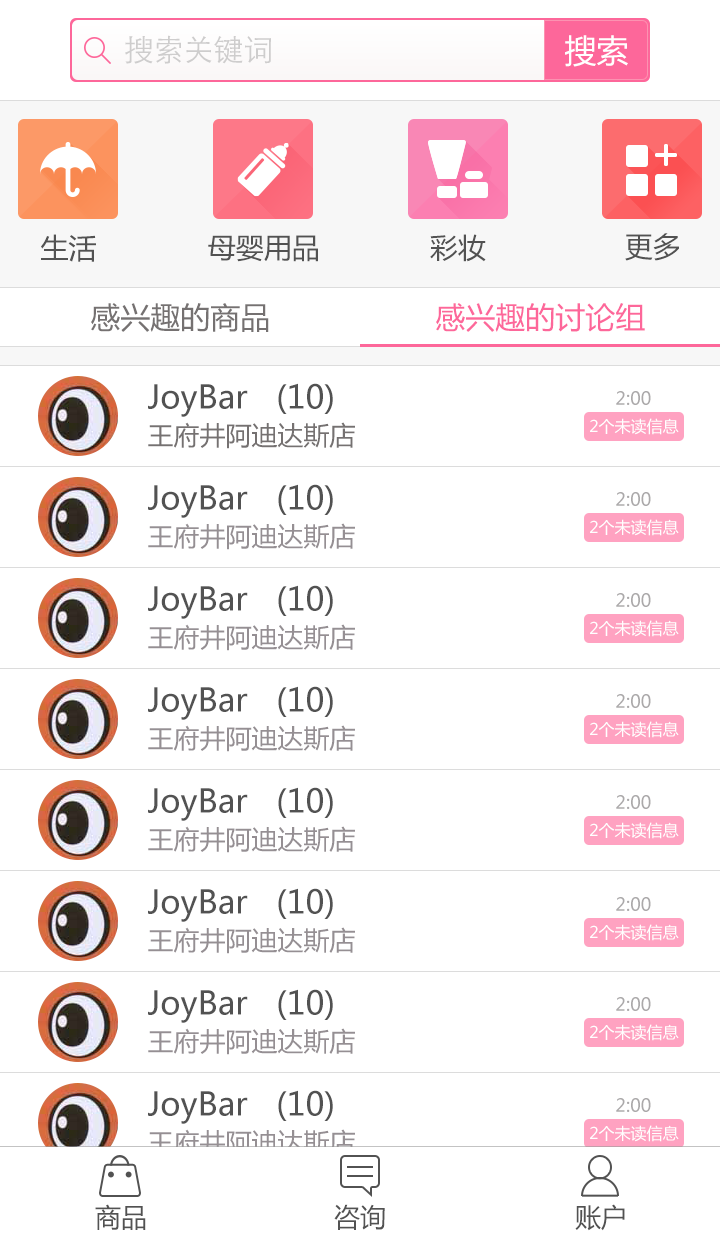
<style>
.page{position:relative;width:720px;height:1242px;background:#ffffff}
.page>*{position:absolute;margin:0}
.t1{font:30px "STXihei";color:#cecdcd}
.t2{font:32px "MicrosoftYaHei";color:#ffffff}
.t3{font:28px "MicrosoftYaHei";color:#525252}
.t4{font:30px "MicrosoftYaHei";color:#757171}
.t5{font:30px "MicrosoftYaHei";color:#fd679a}
.t6{font:32px "MicrosoftYaHei";color:#525252}
.t7{font:18px "MicrosoftYaHei";color:#aba9aa}
.t8{font:26px "MicrosoftYaHei";color:#757171}
.t9{font:16px "MicrosoftYaHei";color:#ffffff}
.t10{font:26px "MicrosoftYaHei";color:#958f93}
.t11{font:26px "MicrosoftYaHei";color:#525252}
</style>
<div class="page">
<p class="t1" style="left:125px;top:35px;width:146px;height:29px">搜索关键词</p>
<p class="t2" style="left:565px;top:35px;width:63px;height:32px">搜索</p>
<p class="t3" style="left:625px;top:233px;width:54px;height:28px">更多</p>
<p class="t3" style="left:41px;top:234px;width:55px;height:28px">生活</p>
<p class="t3" style="left:208px;top:235px;width:110px;height:27px">母婴用品</p>
<p class="t3" style="left:430px;top:234px;width:56px;height:28px">彩妆</p>
<p class="t4" style="left:91px;top:303px;width:178px;height:29px">感兴趣的商品</p>
<p class="t5" style="left:436px;top:303px;width:209px;height:29px">感兴趣的讨论组</p>
<p class="t6" style="left:148px;top:383px;width:185px;height:34px">JoyBar   (10)</p>
<p class="t7" style="left:616px;top:391px;width:35px;height:14px">2:00</p>
<p class="t8" style="left:148px;top:422px;width:207px;height:27px">王府井阿迪达斯店</p>
<p class="t9" style="left:590px;top:418px;width:89px;height:17px">2个未读信息</p>
<p class="t6" style="left:148px;top:484px;width:185px;height:34px">JoyBar   (10)</p>
<p class="t7" style="left:616px;top:492px;width:35px;height:14px">2:00</p>
<p class="t9" style="left:590px;top:519px;width:89px;height:17px">2个未读信息</p>
<p class="t10" style="left:148px;top:523px;width:207px;height:27px">王府井阿迪达斯店</p>
<p class="t6" style="left:148px;top:585px;width:185px;height:34px">JoyBar   (10)</p>
<p class="t7" style="left:616px;top:593px;width:35px;height:14px">2:00</p>
<p class="t10" style="left:148px;top:624px;width:207px;height:27px">王府井阿迪达斯店</p>
<p class="t9" style="left:590px;top:620px;width:89px;height:17px">2个未读信息</p>
<p class="t6" style="left:148px;top:686px;width:185px;height:34px">JoyBar   (10)</p>
<p class="t7" style="left:616px;top:694px;width:35px;height:14px">2:00</p>
<p class="t10" style="left:148px;top:725px;width:207px;height:27px">王府井阿迪达斯店</p>
<p class="t9" style="left:590px;top:721px;width:89px;height:17px">2个未读信息</p>
<p class="t6" style="left:148px;top:787px;width:185px;height:34px">JoyBar   (10)</p>
<p class="t7" style="left:616px;top:795px;width:35px;height:14px">2:00</p>
<p class="t9" style="left:590px;top:822px;width:89px;height:17px">2个未读信息</p>
<p class="t10" style="left:148px;top:826px;width:207px;height:27px">王府井阿迪达斯店</p>
<p class="t6" style="left:148px;top:888px;width:185px;height:34px">JoyBar   (10)</p>
<p class="t7" style="left:616px;top:897px;width:35px;height:14px">2:00</p>
<p class="t10" style="left:148px;top:927px;width:207px;height:27px">王府井阿迪达斯店</p>
<p class="t9" style="left:590px;top:924px;width:89px;height:17px">2个未读信息</p>
<p class="t6" style="left:148px;top:989px;width:185px;height:34px">JoyBar   (10)</p>
<p class="t7" style="left:616px;top:997px;width:35px;height:14px">2:00</p>
<p class="t9" style="left:590px;top:1024px;width:89px;height:17px">2个未读信息</p>
<p class="t10" style="left:148px;top:1028px;width:207px;height:27px">王府井阿迪达斯店</p>
<p class="t6" style="left:148px;top:1090px;width:185px;height:34px">JoyBar   (10)</p>
<p class="t7" style="left:616px;top:1098px;width:35px;height:14px">2:00</p>
<p class="t10" style="left:148px;top:1129px;width:207px;height:27px">王府井阿迪达斯店</p>
<p class="t9" style="left:590px;top:1125px;width:89px;height:17px">2个未读信息</p>
<p class="t11" style="left:95px;top:1204px;width:51px;height:26px">商品</p>
<p class="t11" style="left:334px;top:1204px;width:51px;height:26px">咨询</p>
<p class="t11" style="left:575px;top:1204px;width:50px;height:27px">账户</p>
</div>
